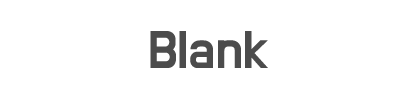
<style>
.page{position:relative;width:396px;height:100px;background:#ffffff}
.page>*{position:absolute;margin:0}
.t1{font:43.6px "BMDoHyeon";color:#4c4c4c}
</style>
<div class="page">
<p class="t1" style="left:150px;top:31px;width:118px;height:37px">Blank</p>
</div>
